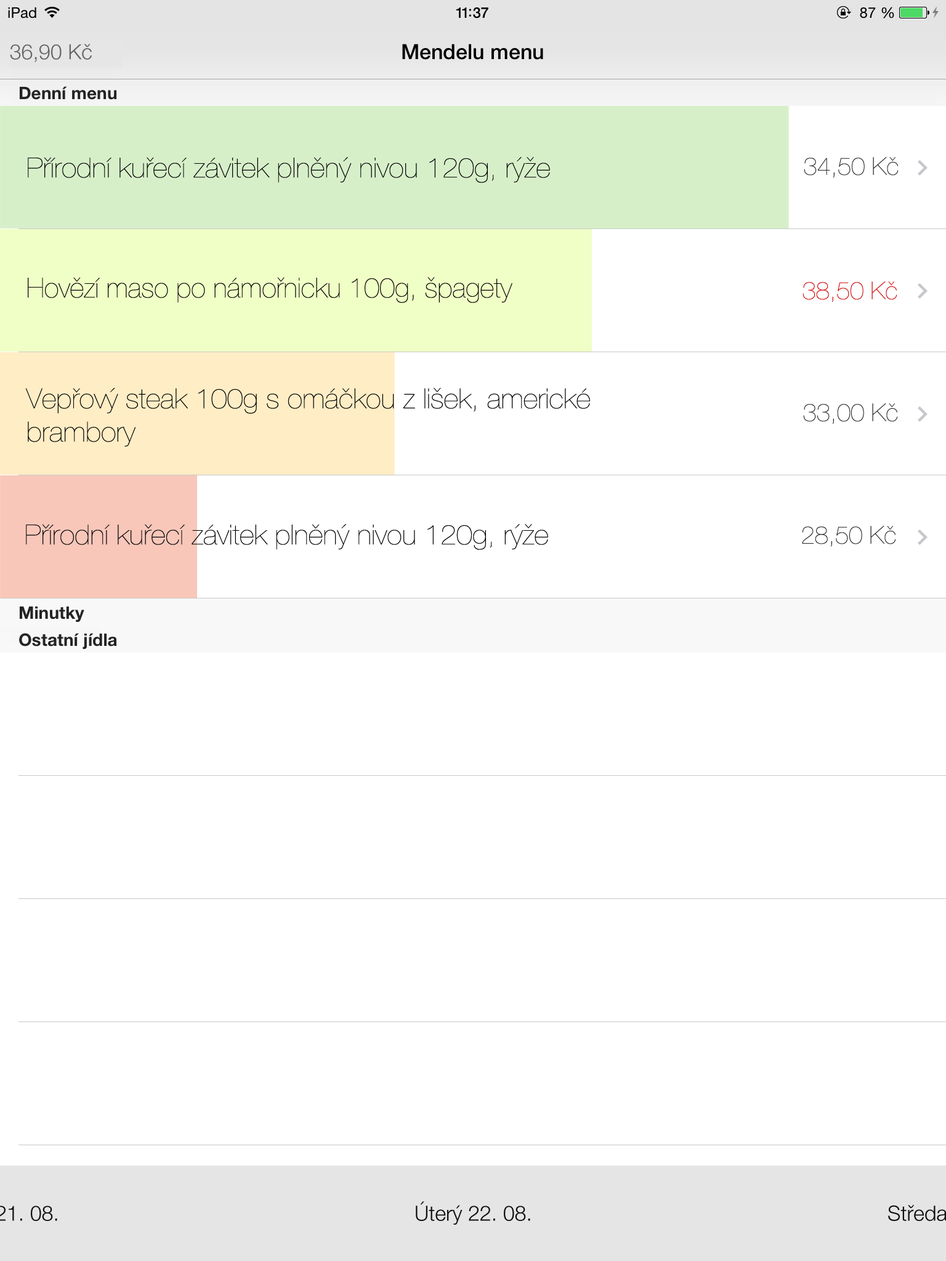
<style>
.page{position:relative;width:946px;height:1261px;background:#ffffff}
.page>*{position:absolute;margin:0}
.t1{font:20.9px "HelveticaNeue-Light";color:#666666}
.t2{font:27.7px "HelveticaNeue-UltraLight";color:#000000;scale:1.04 1}
.t3{font:24.6px "HelveticaNeue-UltraLight";color:#272525}
.t4{font:27.7px "HelveticaNeue-UltraLight";color:#000000}
.t5{font:24.6px "HelveticaNeue-UltraLight";color:#cf0606}
.t6{font:20.9px "HelveticaNeue-Light";color:#100e0e}
</style>
<div class="page">
<p class="t1" style="left:10px;top:44px;width:82px;height:18px">36,90 Kč</p>
<p class="t2" style="left:28px;top:157px;width:522px;height:26px">Přírodní kuřecí závitek plněný nivou 120g, rýže</p>
<p class="t3" style="left:803px;top:157px;width:95px;height:21px">34,50 Kč</p>
<p class="t4" style="left:28px;top:277px;width:484px;height:26px">Hovězí maso po námořnicku 100g, špagety</p>
<p class="t5" style="left:802px;top:281px;width:95px;height:21px">38,50 Kč</p>
<p class="t2" style="left:25px;top:388px;width:565px;height:59px">Vepřový steak 100g s omáčkou z lišek, americké brambory</p>
<p class="t3" style="left:803px;top:403px;width:95px;height:21px">33,00 Kč</p>
<p class="t2" style="left:26px;top:524px;width:522px;height:26px">Přírodní kuřecí závitek plněný nivou 120g, rýže</p>
<p class="t3" style="left:802px;top:526px;width:94px;height:21px">28,50 Kč</p>
<p class="t6" style="left:416px;top:1201px;width:114px;height:24px">Úterý 22. 08.</p>
</div>
